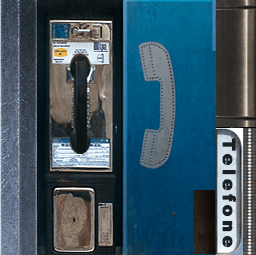
<style>
.page{position:relative;width:256px;height:255px}
.page>*{position:absolute;margin:0}
.t1{font:17.3px "Arial-Black";letter-spacing:0.2em;color:#182023;font-weight:bold}
</style>
<div class="page">
<p class="t1" style="left:222px;top:138px;width:14px;height:110px;rotate:90deg">Telefone</p>
</div>
